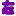
<style>
.page{position:relative;width:16px;height:16px;background:#730099}
.page>*{position:absolute;margin:0}
.t1{font:15.5px "STHupo";letter-spacing:0.18em;color:#730099;scale:0.88 1}
</style>
<div class="page">
<p class="t1" style="left:1px;top:0px;width:14px;height:15px">左</p>
<p class="t1" style="left:1px;top:0px;width:14px;height:15px">右</p>
</div>
